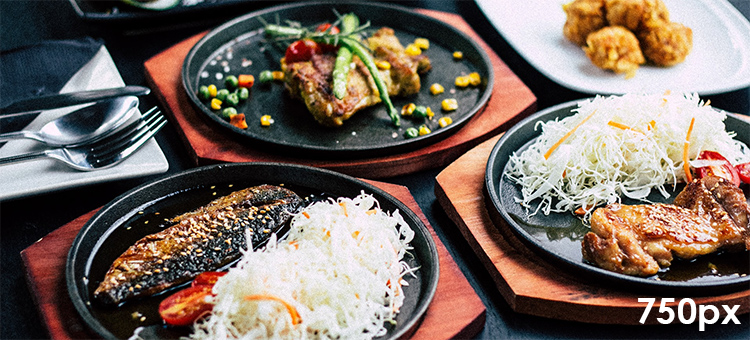
<style>
.page{position:relative;width:750px;height:340px}
.page>*{position:absolute;margin:0}
.t1{font:36px "CenturyGothic-Bold";color:#ffffff}
</style>
<div class="page">
<p class="t1" style="left:638px;top:298px;width:103px;height:33px">750px</p>
</div>
